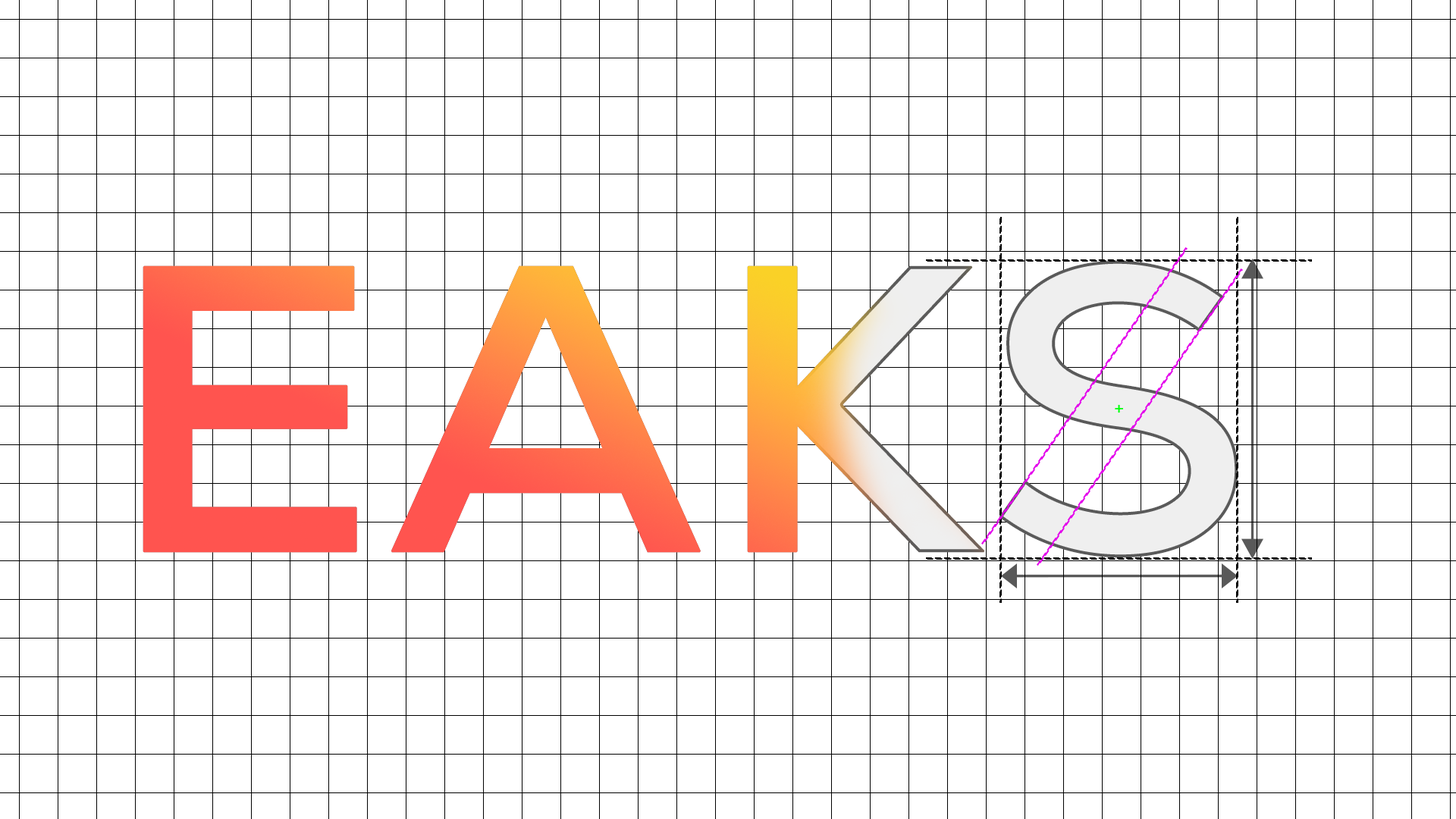
<style>
.page{position:relative;width:1456px;height:819px;background:#ffffff}
.page>*{position:absolute;margin:0}
.t1{font:406.6px "NexaDemo-Bold";font-weight:bold}
.t2{font:18.5px "NexaDemo-Light";color:#00ff0c;font-weight:bold}
</style>
<div class="page">
<p class="t1" style="left:143px;top:260px;width:1095px;height:298px">EAKS</p>
<p class="t1" style="left:143px;top:260px;width:1095px;height:298px">EAKS</p>
<p class="t2" style="left:1115px;top:404px;width:8px;height:9px">+</p>
</div>
